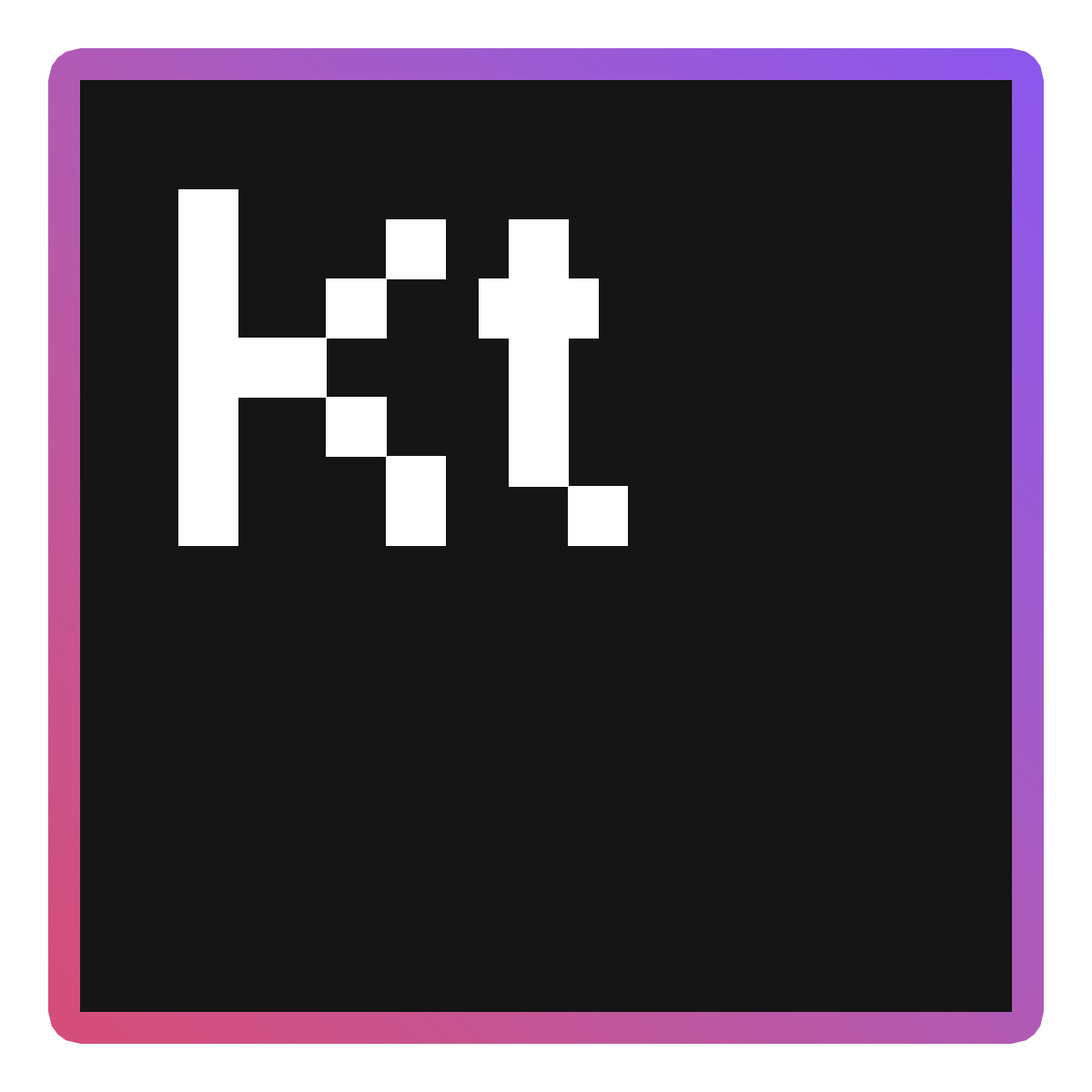
<style>
.page{position:relative;width:1092px;height:1092px;background:#151515}
.page>*{position:absolute;margin:0}
.t1{font:474px "CloaksPlusMinecraft";letter-spacing:0.01em;color:#ffffff}
</style>
<div class="page">
<p class="t1" style="left:178px;top:189px;width:450px;height:357px">Kt</p>
</div>
